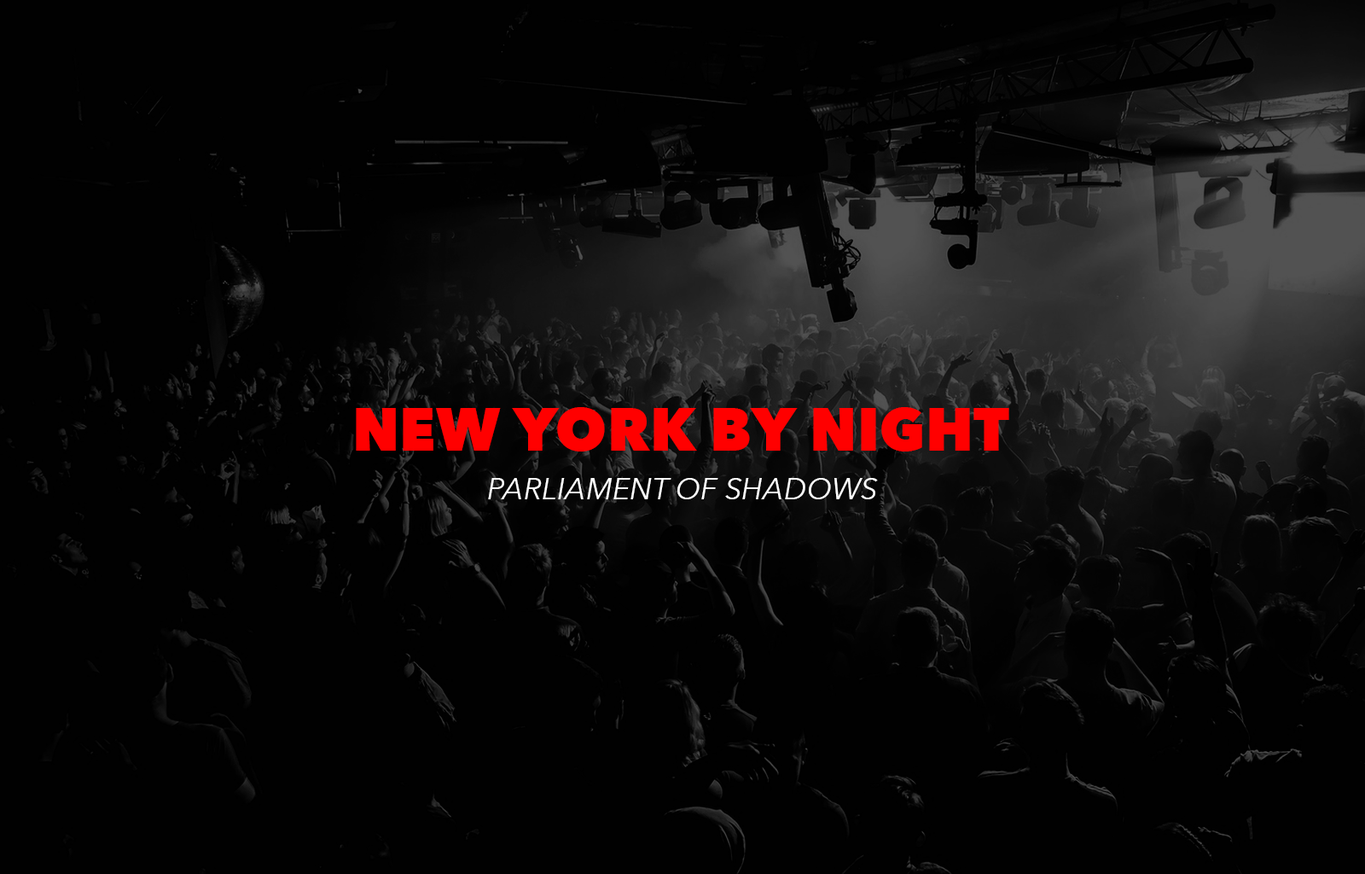
<style>
.page{position:relative;width:1365px;height:874px;background:#010101}
.page>*{position:absolute;margin:0}
.t1{font:60px "AvenirNext-Heavy";color:#ff0000}
.t2{font:30px "AvenirNext-Italic";color:#ffffff}
</style>
<div class="page">
<p class="t1" style="left:356px;top:407px;width:653px;height:44px">NEW YORK BY NIGHT</p>
<p class="t2" style="left:488px;top:478px;width:390px;height:21px">PARLIAMENT OF SHADOWS</p>
</div>
